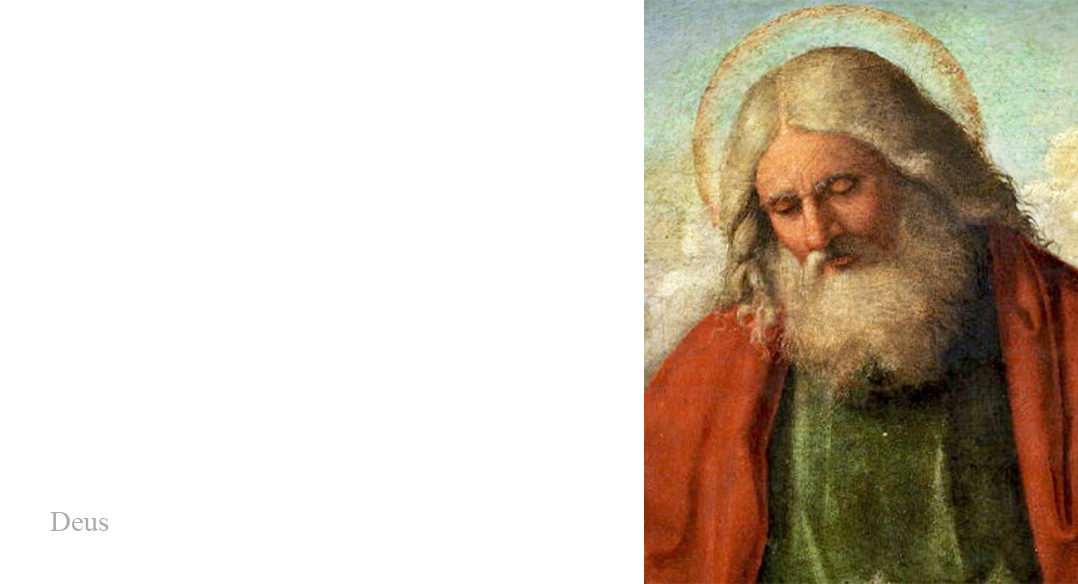
<style>
.page{position:relative;width:1078px;height:584px;background:#ffffff}
.page>*{position:absolute;margin:0}
.t1{font:28.9px "TimesNewRomanPSMT";color:#adadad}
</style>
<div class="page">
<p class="t1" style="left:50px;top:512px;width:59px;height:19px">Deus</p>
</div>
